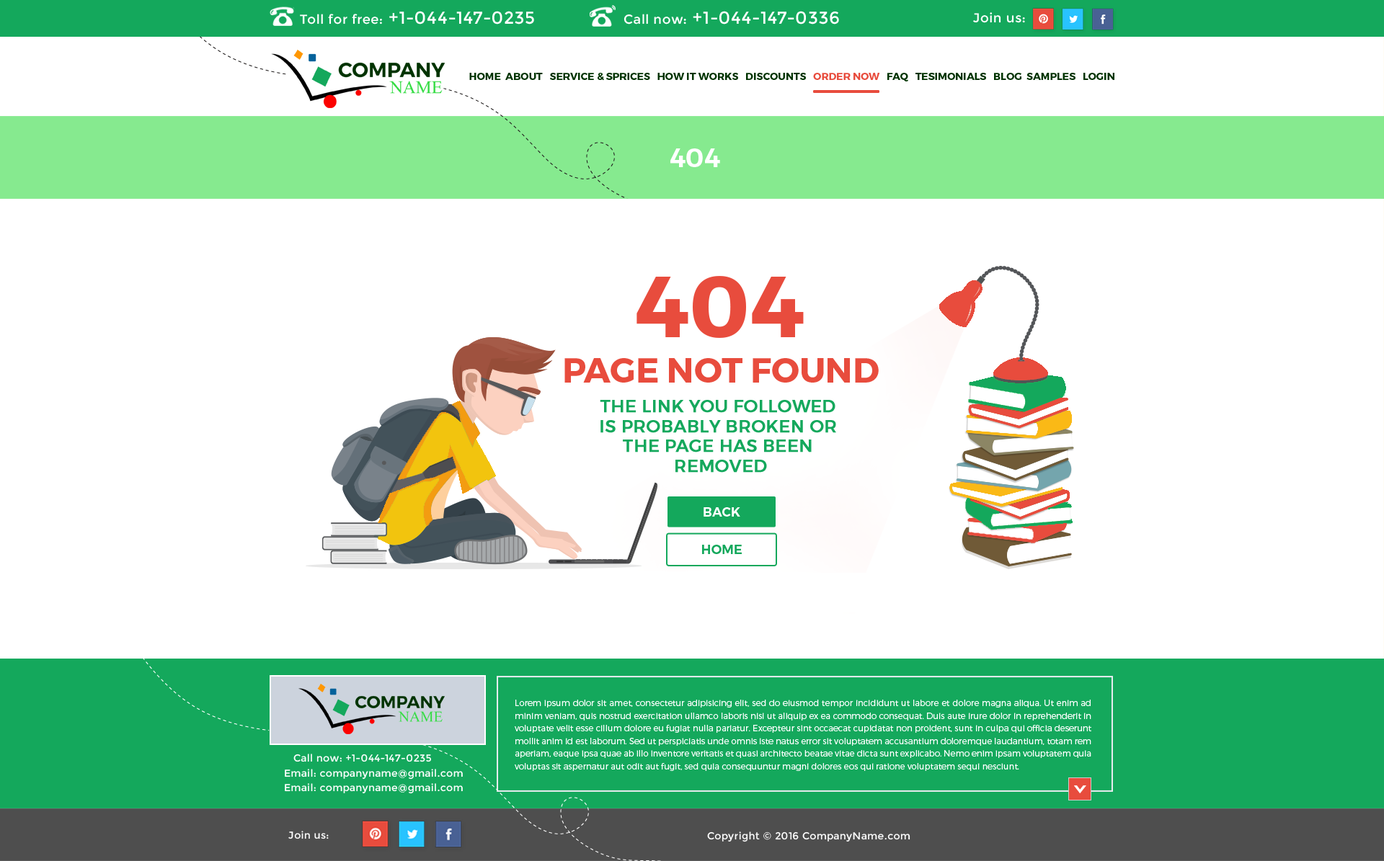
<style>
.page{position:relative;width:1384px;height:861px;background:#ffffff}
.page>*{position:absolute;margin:0}
.t1{font:17.3px "Montserrat-Regular";letter-spacing:0.025em;color:#ffffff}
.t2{font:13px "Montserrat-Regular";letter-spacing:0.025em;color:#ffffff}
.t3{font:10.1px "Montserrat-Bold";color:#003300;text-transform:uppercase}
.t4{font:10.1px "Montserrat-Bold";color:#e84c3d;text-transform:uppercase}
.t5{font:26px "Montserrat-SemiBold";color:#ffffff;text-transform:uppercase}
.t6{font:86.5px "Montserrat-Bold";color:#e84c3d;text-transform:uppercase}
.t7{font:34.6px "Montserrat-Bold";color:#e84c3d;text-transform:uppercase}
.t8{font:17.3px/19.8px "Montserrat-Regular";color:#14a85c;font-weight:bold}
.t9{font:13px "Montserrat-SemiBold";color:#ffffff;text-transform:uppercase}
.t10{font:13px "Montserrat-SemiBold";color:#14a85c;text-transform:uppercase}
.t11{font:8.4px/12.7px "Montserrat-Light";color:#ffffff}
.t12{font:10.1px "Montserrat-Regular";letter-spacing:0.025em;color:#ffffff}
</style>
<div class="page">
<p class="t1" style="left:300px;top:11px;width:234px;height:14px"><span class="t2">Toll for free:</span> +1-044-147-0235</p>
<p class="t1" style="left:624px;top:11px;width:215px;height:14px"><span class="t2">Call now:</span> +1-044-147-0336</p>
<p class="t2" style="left:973px;top:12px;width:52px;height:11px">Join us:</p>
<p class="t3" style="left:469px;top:73px;width:646px;height:8px">Home  ABOUT   SERVICE &amp; SPriCES   HOw it works   Discounts   <span class="t4">Order Now   </span>FAQ   Tesimonials   Blog  Samples   Login</p>
<p class="t5" style="left:670px;top:149px;width:50px;height:18px">404</p>
<p class="t6" style="left:637px;top:276px;width:167px;height:62px">404</p>
<p class="t7" style="left:564px;top:358px;width:315px;height:25px">Page not found</p>
<p class="t8" style="left:600px;top:400px;width:236px;height:73px;text-align:center">THE LINK YOU FOLLOWED<br> IS PROBABLY BROKEN OR <br>THE PAGE HAS BEEN<br> REMOVED</p>
<p class="t9" style="left:704px;top:508px;width:36px;height:9px">Back</p>
<p class="t10" style="left:702px;top:545px;width:40px;height:9px">home</p>
<p class="t11" style="left:515px;top:700px;width:576px;height:71px;text-align:justify">Lorem ipsum dolor sit amet, consectetur adipisicing elit, sed do eiusmod tempor incididunt ut labore et dolore magna aliqua. Ut enim ad minim veniam, quis nostrud exercitation ullamco laboris nisi ut aliquip ex ea commodo consequat. Duis aute irure dolor in reprehenderit in voluptate velit esse cillum dolore eu fugiat nulla pariatur. Excepteur sint occaecat cupidatat non proident, sunt in culpa qui officia deserunt mollit anim id est laborum. Sed ut perspiciatis unde omnis iste natus error sit voluptatem accusantium doloremque laudantium, totam rem aperiam, eaque ipsa quae ab illo inventore veritatis et quasi architecto beatae vitae dicta sunt explicabo. Nemo enim ipsam voluptatem quia voluptas sit aspernatur aut odit aut fugit, sed quia consequuntur magni dolores eos qui ratione voluptatem sequi nesciunt.</p>
<p class="t12" style="left:293px;top:754px;width:138px;height:9px">Call now: +1-044-147-0235</p>
<p class="t12" style="left:285px;top:769px;width:178px;height:11px">Email: companyname@gmail.com</p>
<p class="t12" style="left:285px;top:784px;width:178px;height:10px">Email: companyname@gmail.com</p>
<p class="t12" style="left:288px;top:831px;width:41px;height:9px">Join us:</p>
<p class="t12" style="left:707px;top:832px;width:204px;height:11px">Copyright © 2016 CompanyName.com</p>
</div>
